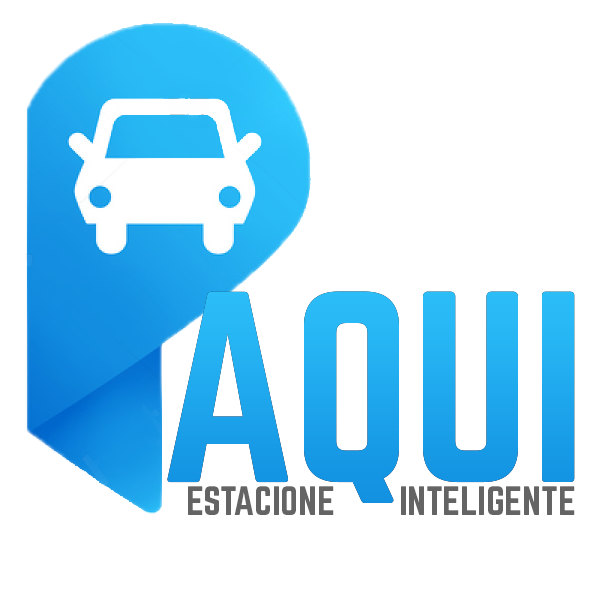
<style>
.page{position:relative;width:613px;height:613px;background:#ffffff}
.page>*{position:absolute;margin:0}
.t1{font:237.9px "Norwester-Regular";color:#1fa8ed;text-transform:uppercase}
.t2{font:36px "Norwester-Regular";color:#646464;text-transform:uppercase}
</style>
<div class="page">
<p class="t1" style="left:167px;top:291px;width:408px;height:212px">aqui</p>
<p class="t2" style="left:188px;top:486px;width:146px;height:29px">Estacione</p>
<p class="t2" style="left:401px;top:486px;width:174px;height:29px">inteligente</p>
</div>
